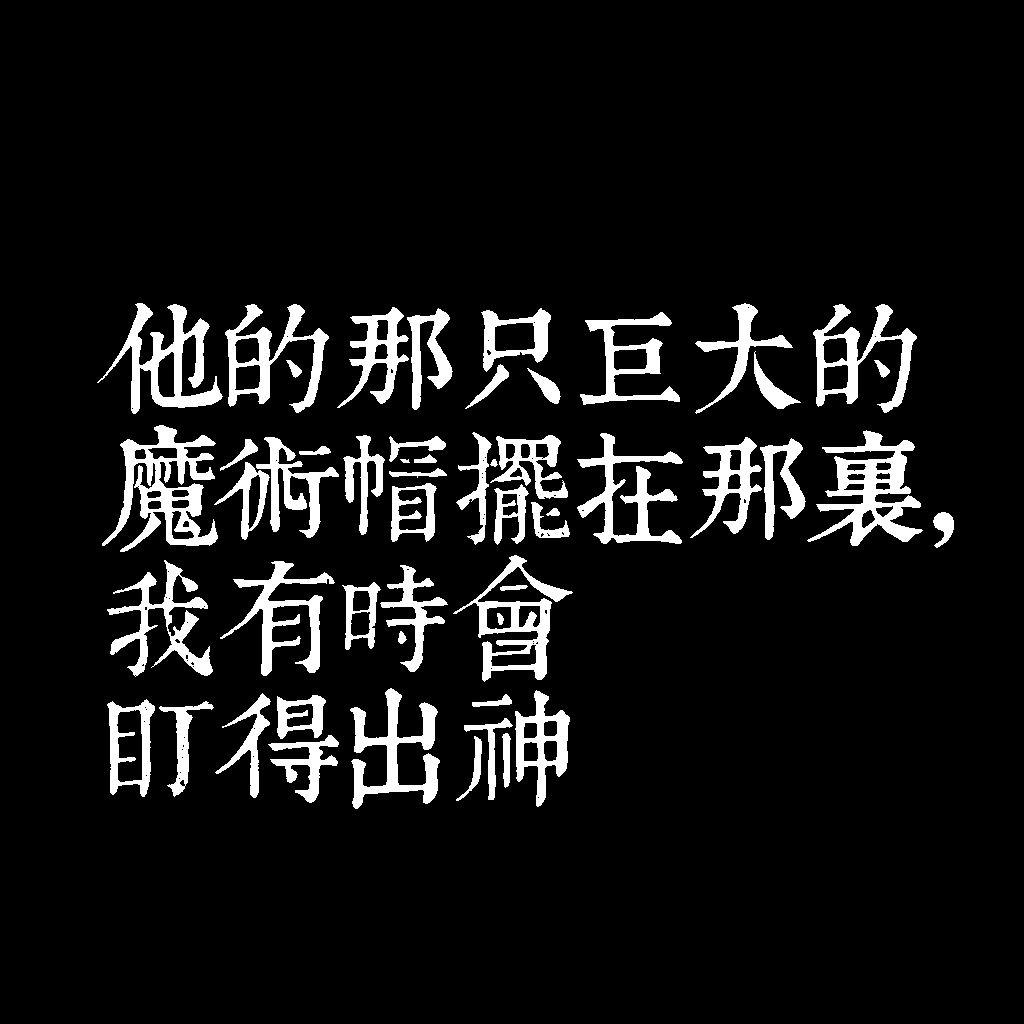
<style>
.page{position:relative;width:1024px;height:1024px;background:#000000}
.page>*{position:absolute;margin:0}
.t1{font:120px/130px "TpldKhangXiDictTrial";letter-spacing:-0.02em;color:#ffffff}
</style>
<div class="page">
<p class="t1" style="left:97px;top:303px;width:857px;height:506px">他的那只巨大的<br>魔術帽擺在那裡，<br>我有時會<br>盯得出神</p>
</div>
